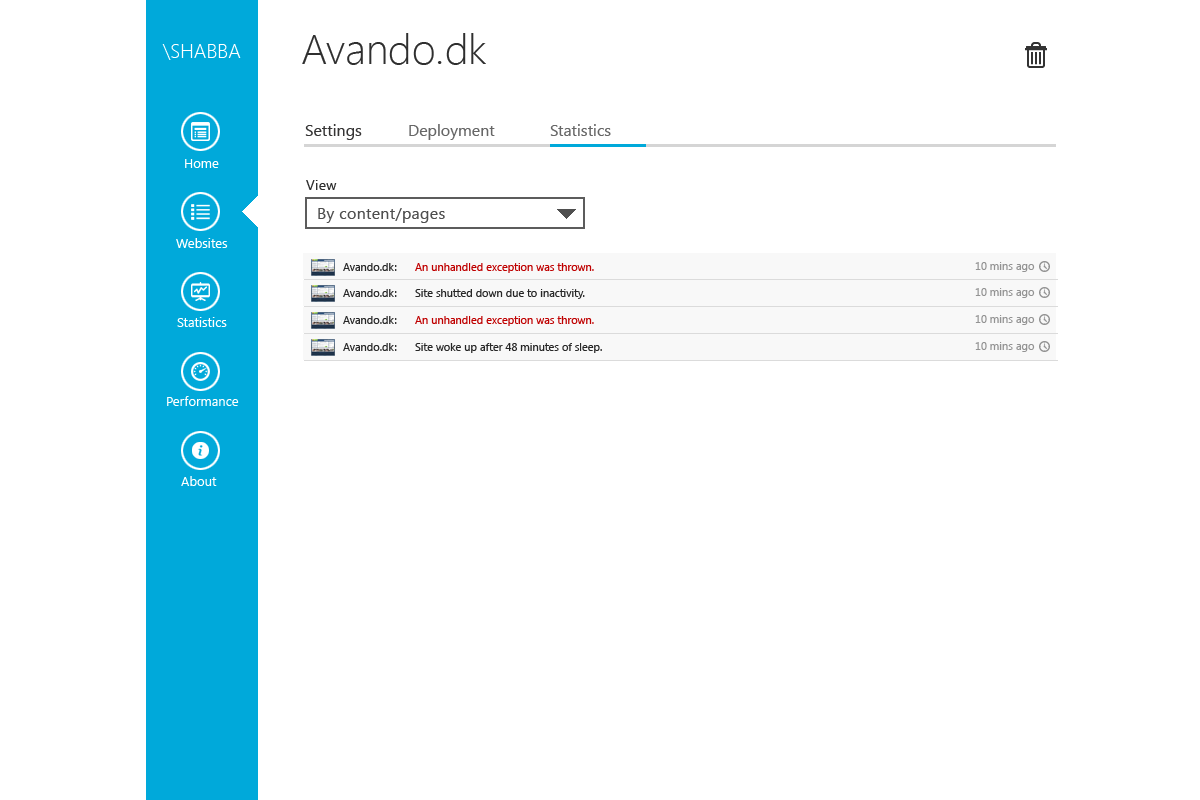
<style>
.page{position:relative;width:1200px;height:800px;background:#ffffff}
.page>*{position:absolute;margin:0}
.t1{font:42px "SegoeUI-Light";color:#2f2f2f}
.t2{font:20px "SegoeUI-Light";color:#ffffff}
.t3{font:16px "SegoeUI";color:#363535}
.t4{font:16px "SegoeUI";color:#676767}
.t5{font:13px "SegoeUI";color:#ffffff}
.t6{font:14px "SegoeUI";letter-spacing:0.02em;color:#2f2f2f}
.t7{font:16px "SegoeUI";letter-spacing:0.02em;color:#4f4f4f}
.t8{font:11px "SegoeUI";color:#bf0000}
.t9{font:11px "SegoeUI";color:#272727}
.t10{font:11px "SegoeUI";color:#939393}
</style>
<div class="page">
<p class="t1" style="left:302px;top:33px;width:184px;height:32px">Avando.dk</p>
<p class="t2" style="left:162px;top:44px;width:79px;height:16px">\SHABBA</p>
<p class="t3" style="left:305px;top:124px;width:57px;height:16px">Settings</p>
<p class="t4" style="left:409px;top:124px;width:86px;height:16px">Deployment</p>
<p class="t4" style="left:550px;top:124px;width:61px;height:12px">Statistics</p>
<p class="t5" style="left:185px;top:159px;width:34px;height:9px">Home</p>
<p class="t6" style="left:306px;top:180px;width:31px;height:10px">View</p>
<p class="t7" style="left:318px;top:208px;width:127px;height:15px">By content/pages</p>
<p class="t5" style="left:176px;top:238px;width:52px;height:10px">Websites</p>
<p class="t8" style="left:343px;top:263px;width:251px;height:10px"><span class="t9">Avando.dk: </span>An unhandled exception was thrown.</p>
<p class="t10" style="left:975px;top:262px;width:60px;height:10px">10 mins ago</p>
<p class="t9" style="left:343px;top:289px;width:242px;height:10px">Avando.dk: Site shutted down due to inactivity.</p>
<p class="t10" style="left:975px;top:288px;width:60px;height:10px">10 mins ago</p>
<p class="t5" style="left:177px;top:317px;width:50px;height:10px">Statistics</p>
<p class="t8" style="left:343px;top:316px;width:251px;height:10px"><span class="t9">Avando.dk: </span>An unhandled exception was thrown.</p>
<p class="t10" style="left:975px;top:315px;width:60px;height:10px">10 mins ago</p>
<p class="t10" style="left:975px;top:342px;width:60px;height:10px">10 mins ago</p>
<p class="t9" style="left:343px;top:343px;width:259px;height:10px">Avando.dk: Site woke up after 48 minutes of sleep.</p>
<p class="t5" style="left:167px;top:396px;width:72px;height:10px">Performance</p>
<p class="t5" style="left:181px;top:476px;width:36px;height:10px">About</p>
</div>
